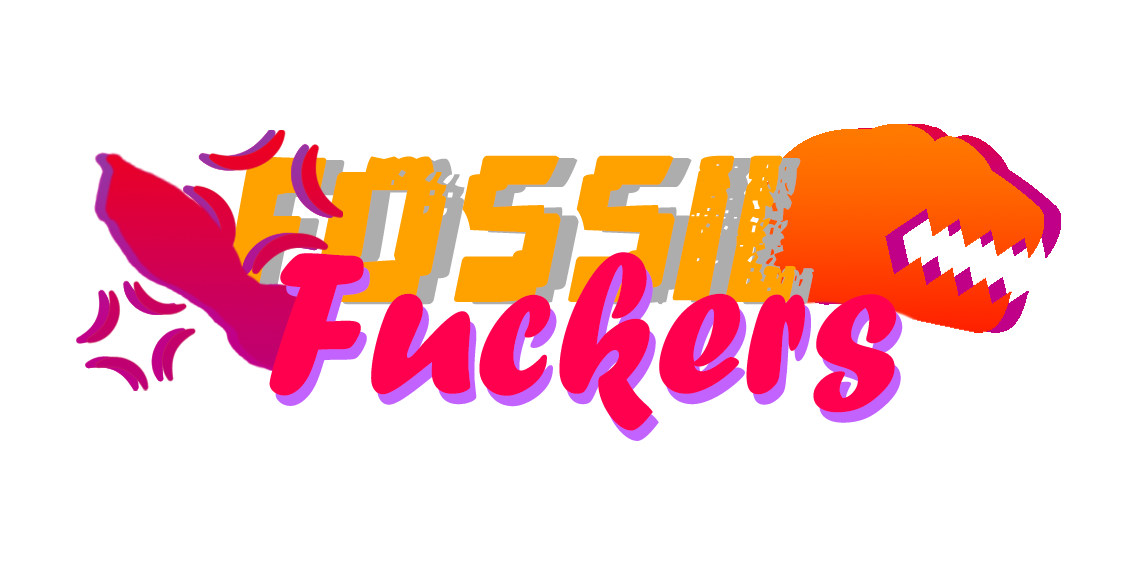
<style>
.page{position:relative;width:1131px;height:566px;background:#ffffff}
.page>*{position:absolute;margin:0}
.t1{font:209.7px "pixeldead-Italic";color:#ffa200}
.t2{font:209.7px "pixeldead-Italic"}
.t3{font:209.7px "ForteMT";color:#ff004e}
.t4{font:209.7px "ForteMT"}
</style>
<div class="page">
<p class="t1" style="left:223px;top:155px;width:573px;height:147px">Fossil</p>
<p class="t2" style="left:241px;top:158px;width:573px;height:147px">Fossil</p>
<p class="t3" style="left:269px;top:252px;width:628px;height:179px">Fuckers</p>
<p class="t4" style="left:275px;top:262px;width:628px;height:179px">Fuckers</p>
</div>
